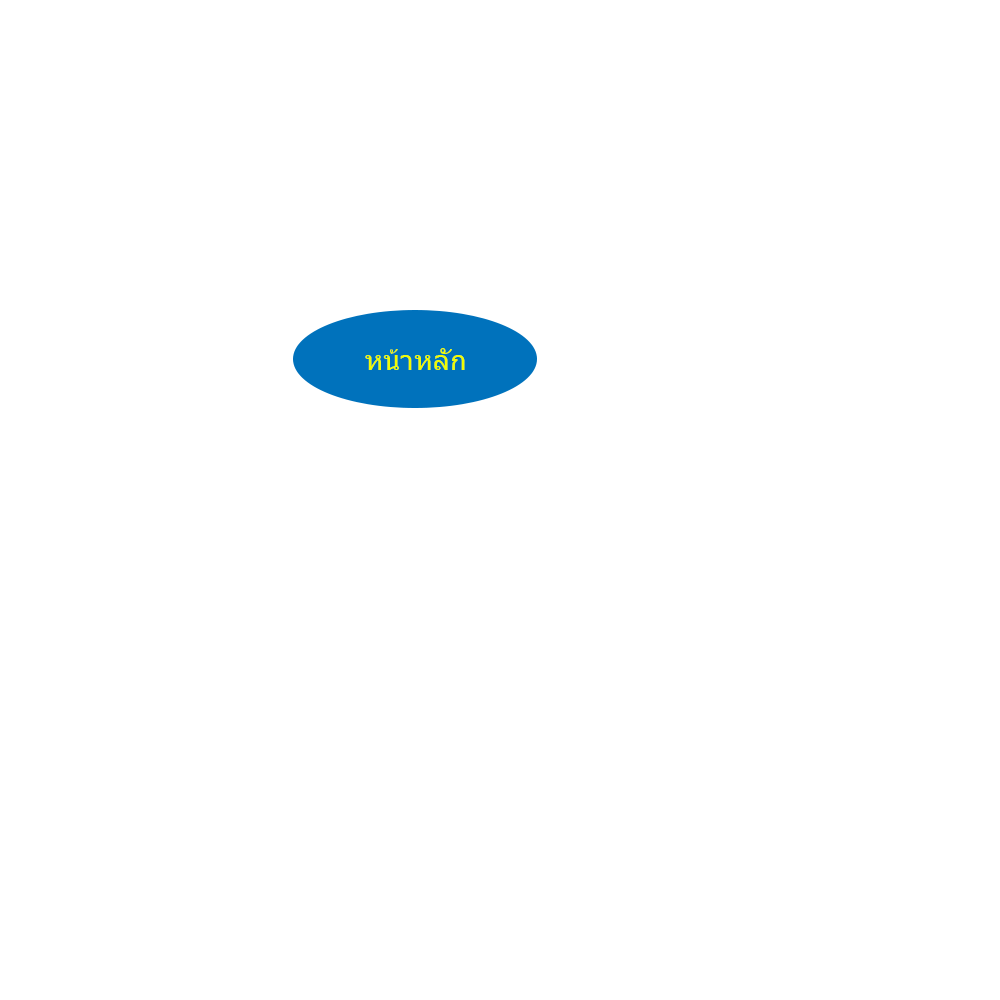
<style>
.page{position:relative;width:1000px;height:1000px;background:#ffffff}
.page>*{position:absolute;margin:0}
.t1{font:28px "Tahoma";color:#eefd02}
</style>
<div class="page">
<p class="t1" style="left:365px;top:348px;width:100px;height:22px">หน้าหลัก</p>
</div>
